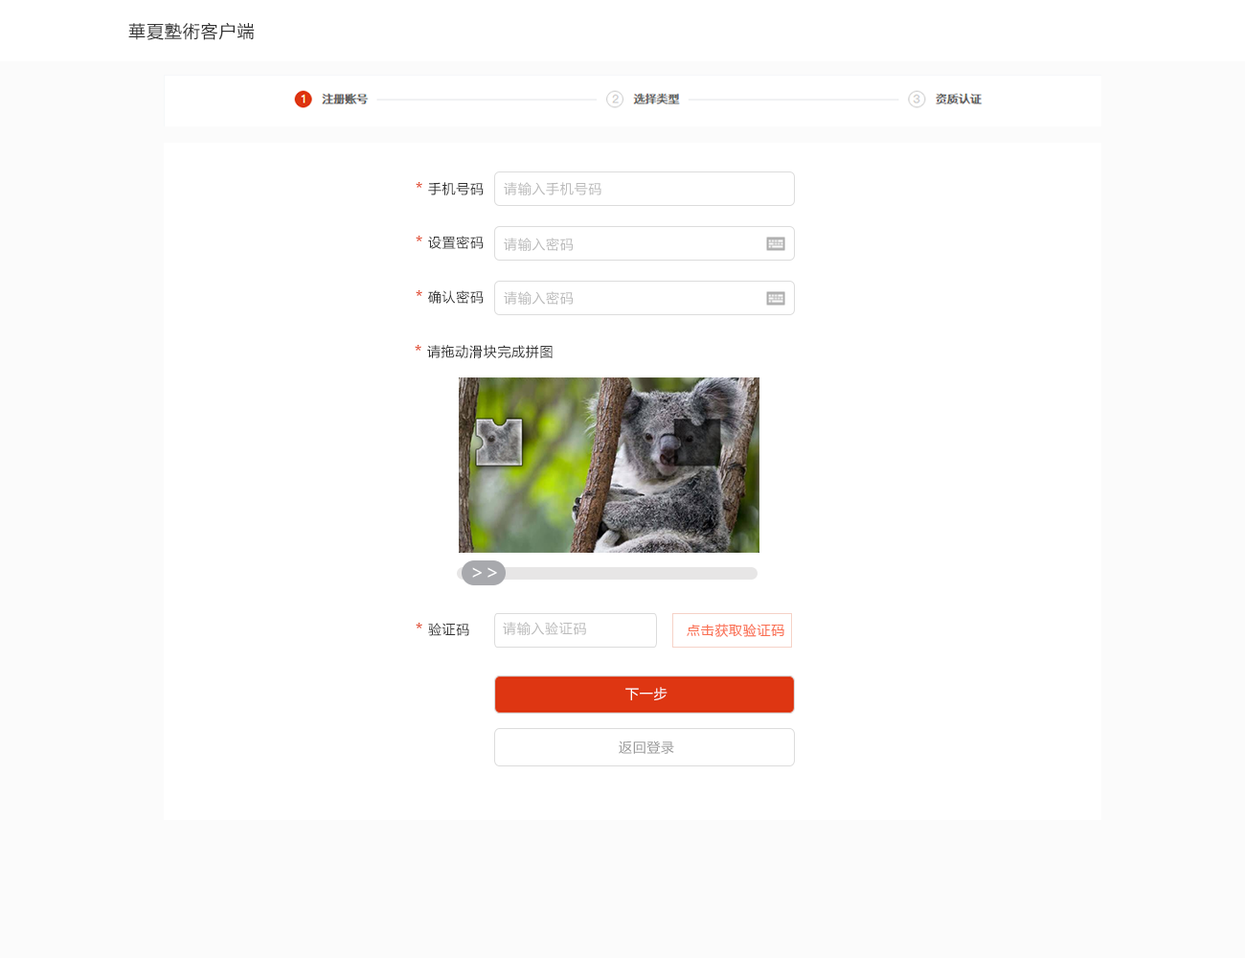
<style>
.page{position:relative;width:1245px;height:958px;background:#ffffff}
.page>*{position:absolute;margin:0}
.t1{font:17.2px "MicrosoftYaHei";letter-spacing:0.05em;color:#333333}
.t2{font:13.4px "MicrosoftYaHei";letter-spacing:0.05em;color:#333333}
.t3{font:15.3px "MicrosoftYaHei";letter-spacing:0.05em;color:#de3612}
.t4{font:13.4px "MicrosoftYaHei";letter-spacing:0.05em;color:#bbbbbb}
.t5{font:19.2px "MicrosoftYaHei";letter-spacing:0.05em;color:#ffffff}
.t6{font:13.4px "MicrosoftYaHei";letter-spacing:0.05em;color:#fa6f51}
.t7{font:13.4px "MicrosoftYaHei";letter-spacing:0.05em;color:#ffffff}
.t8{font:13.4px "MicrosoftYaHei";letter-spacing:0.05em;color:#999999}
</style>
<div class="page">
<p class="t1" style="left:128px;top:22px;width:127px;height:18px">華夏塾術客户端</p>
<p class="t2" style="left:416px;top:182px;width:68px;height:13px"><span class="t3">* </span>手机号码</p>
<p class="t4" style="left:504px;top:182px;width:97px;height:13px">请输入手机号码</p>
<p class="t2" style="left:416px;top:236px;width:68px;height:13px"><span class="t3">* </span>设置密码</p>
<p class="t4" style="left:504px;top:238px;width:69px;height:13px">请输入密码</p>
<p class="t2" style="left:416px;top:290px;width:68px;height:14px"><span class="t3">* </span>确认密码</p>
<p class="t4" style="left:504px;top:291px;width:69px;height:14px">请输入密码</p>
<p class="t2" style="left:415px;top:345px;width:138px;height:13px"><span class="t3">* </span>请拖动滑块完成拼图</p>
<p class="t5" style="left:472px;top:567px;width:25px;height:11px">&gt;&gt;</p>
<p class="t2" style="left:416px;top:623px;width:53px;height:13px"><span class="t3">* </span>验证码</p>
<p class="t4" style="left:503px;top:622px;width:83px;height:13px">请输入验证码</p>
<p class="t6" style="left:687px;top:623px;width:97px;height:14px">点击获取验证码</p>
<p class="t7" style="left:625px;top:687px;width:43px;height:13px">下一步</p>
<p class="t8" style="left:619px;top:740px;width:55px;height:14px">返回登录</p>
</div>
